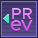
<style>
.page{position:relative;width:38px;height:38px}
.page>*{position:absolute;margin:0}
.t1{font:16px "Metropolis-Medium";color:#ee84f7}
.t2{font:21px "Metropolis-Medium";color:#e25df1}
.t3{font:16px "Metropolis-Medium";color:#e151f0}
</style>
<div class="page">
<p class="t1" style="left:12px;top:8px;width:20px;height:11px">PR</p>
<p class="t2" style="left:10px;top:20px;width:12px;height:11px">e</p>
<p class="t3" style="left:21px;top:20px;width:12px;height:11px">V</p>
</div>
